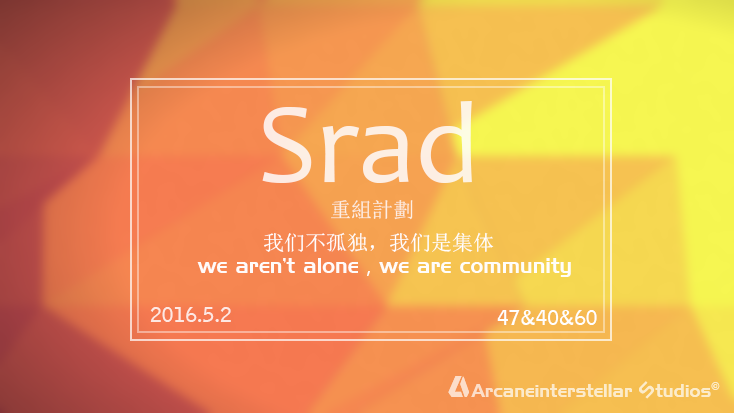
<style>
.page{position:relative;width:734px;height:413px}
.page>*{position:absolute;margin:0}
.t1{font:200px "Candara";color:#fdefe3}
.t2{font:36px "SimSun";color:#fdeee3}
.t3{font:36px "SimSun";color:#ffffff}
.t4{font:36px "435-CAI978";color:#ffffff}
.t5{font:36px "MicrosoftYaHei";color:#ffffff}
.t6{font:36px "307-CAI978";color:#fde8e3}
.t7{font:36px "307-CAI978";color:#ffffff}
</style>
<div class="page">
<p class="t1" style="left:262px;top:101px;width:210px;height:82px">Srad</p>
<p class="t2" style="left:331px;top:200px;width:82px;height:20px">重組計劃</p>
<p class="t3" style="left:264px;top:232px;width:230px;height:21px">我们不孤独，我们是集体</p>
<p class="t4" style="left:197px;top:258px;width:374px;height:19px;opacity:0.96">we aren’t alone<span class="t5">，</span>we are community</p>
<p class="t6" style="left:150px;top:307px;width:81px;height:15px">2016.5.2</p>
<p class="t7" style="left:497px;top:310px;width:100px;height:15px">47&amp;40&amp;60</p>
</div>
